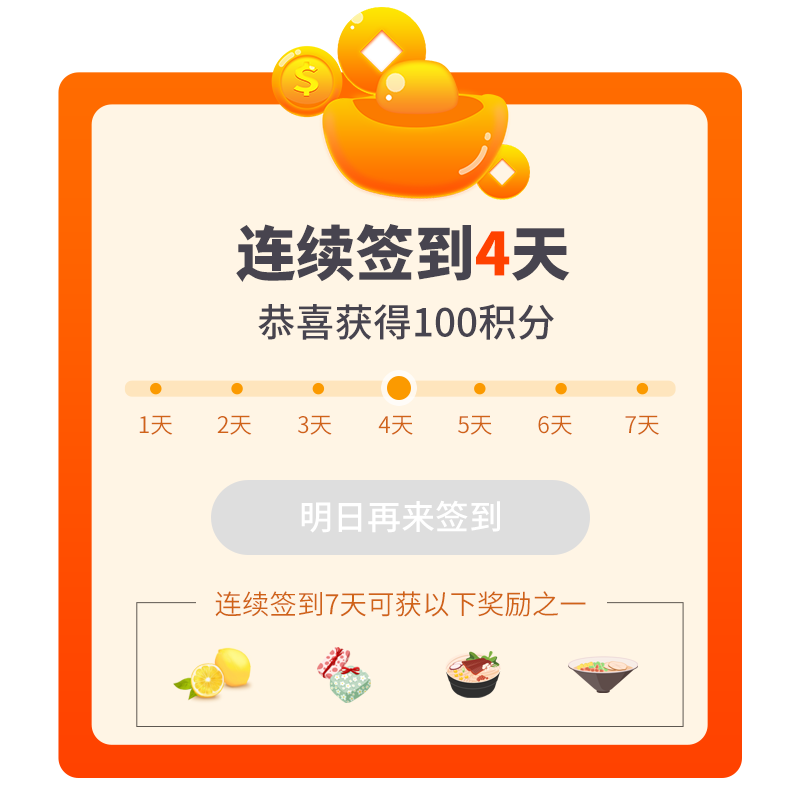
<style>
.page{position:relative;width:800px;height:800px;background:#fff5e5}
.page>*{position:absolute;margin:0}
.t1{font:59.5px "SourceHanSansCN-Heavy";color:#47444f}
.t2{font:59.5px "SourceHanSansCN-Heavy";color:#ff4200}
.t3{font:38.7px "SourceHanSansCN-Medium";color:#47444f}
.t4{font:22.9px "SourceHanSansCN-Normal";color:#d06317}
.t5{font:34px "SourceHanSansCN-Medium";color:#ffffff}
.t6{font:27.5px "SourceHanSansCN-Normal";color:#d06317}
</style>
<div class="page">
<p class="t1" style="left:236px;top:224px;width:334px;height:58px">连续签到<span class="t2">4</span>天</p>
<p class="t3" style="left:258px;top:304px;width:296px;height:36px">恭喜获得100积分</p>
<p class="t4" style="left:139px;top:415px;width:34px;height:20px">1天</p>
<p class="t4" style="left:217px;top:415px;width:35px;height:20px">2天</p>
<p class="t4" style="left:298px;top:415px;width:34px;height:20px">3天</p>
<p class="t4" style="left:378px;top:415px;width:35px;height:20px">4天</p>
<p class="t4" style="left:458px;top:415px;width:34px;height:20px">5天</p>
<p class="t4" style="left:538px;top:415px;width:34px;height:20px">6天</p>
<p class="t4" style="left:625px;top:415px;width:34px;height:20px">7天</p>
<p class="t5" style="left:301px;top:500px;width:199px;height:33px">明日再来签到</p>
<p class="t6" style="left:215px;top:591px;width:371px;height:26px">连续签到7天可获以下奖励之一</p>
</div>
